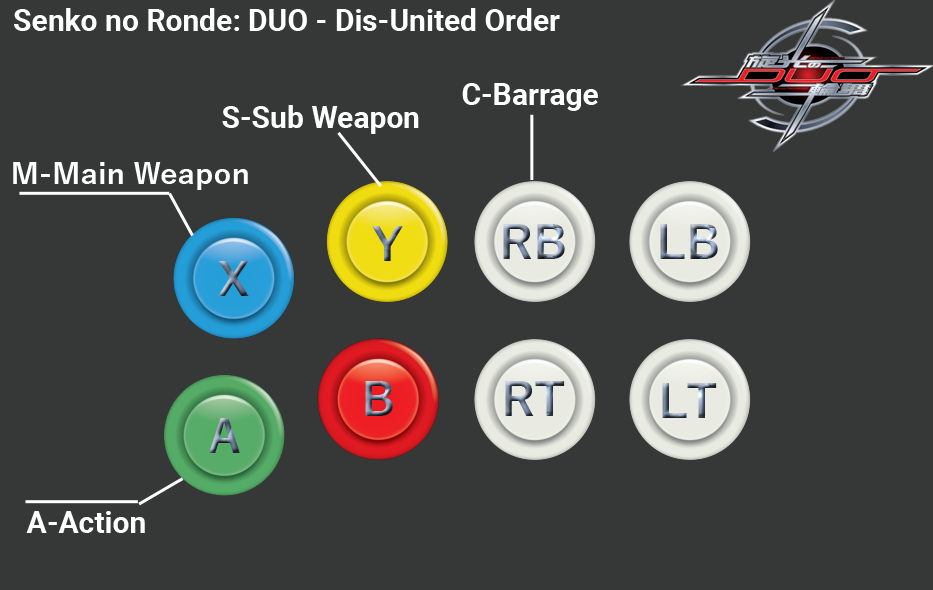
<style>
.page{position:relative;width:933px;height:590px;background:#363838}
.page>*{position:absolute;margin:0}
.t1{font:30px "Roboto-Bold";color:#ffffff}
.t2{font:30px "YuGothic-Bold";color:#ffffff}
</style>
<div class="page">
<p class="t1" style="left:14px;top:8px;width:546px;height:23px">Senko no Ronde: DUO - Dis-United Order</p>
<p class="t1" style="left:462px;top:83px;width:136px;height:28px">C-Barrage</p>
<p class="t1" style="left:222px;top:105px;width:197px;height:29px">S-Sub Weapon</p>
<p class="t2" style="left:13px;top:162px;width:235px;height:28px">M-Main Weapon</p>
<p class="t1" style="left:26px;top:511px;width:119px;height:22px">A-Action</p>
</div>
